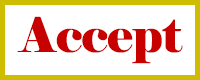
<style>
.page{position:relative;width:200px;height:80px;background:#ffffff}
.page>*{position:absolute;margin:0}
.t1{font:48px "Elephant-Regular";color:#c70000}
</style>
<div class="page">
<p class="t1" style="left:17px;top:16px;width:166px;height:48px">Accept</p>
</div>
